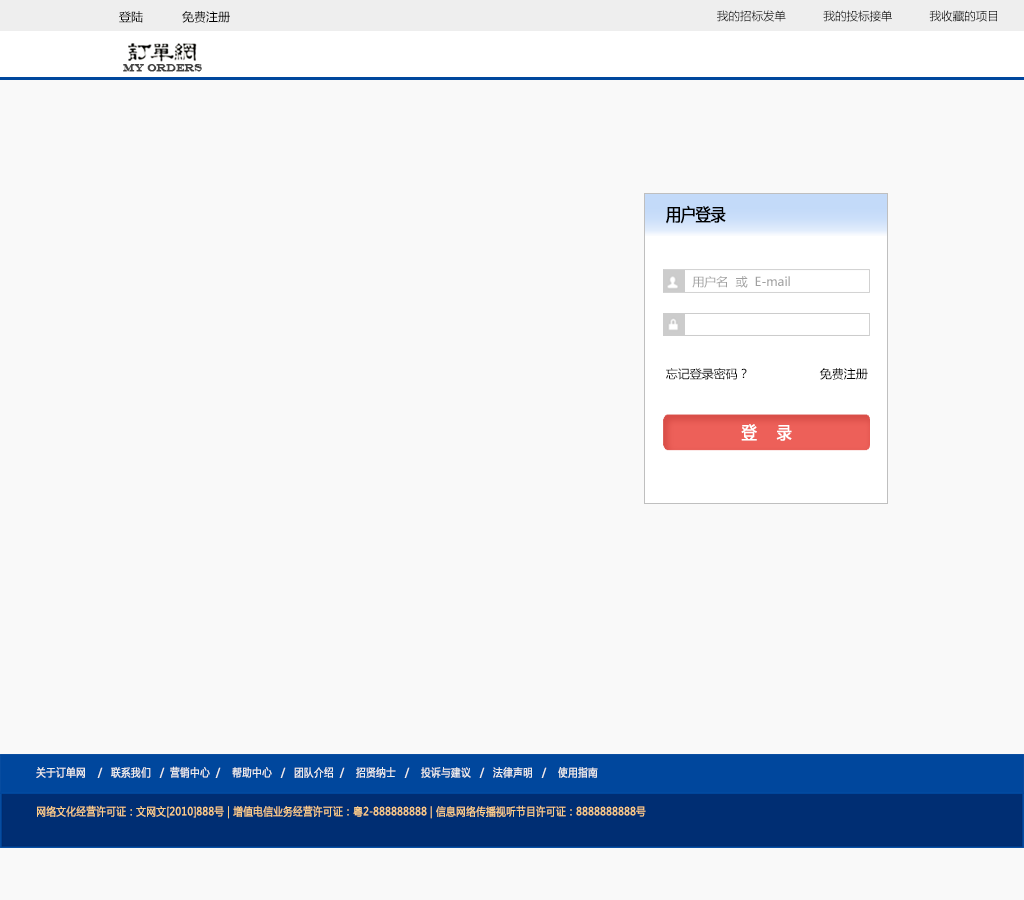
<style>
.page{position:relative;width:1024px;height:900px;background:#f9f9f9}
.page>*{position:absolute;margin:0}
.t1{font:12px "MicrosoftYaHei";color:#000000}
.t2{font:11.5px "MicrosoftYaHei";color:#000000}
.t3{font:11px "EngraversMT";color:#434343;font-variant:small-caps;font-weight:bold;scale:0.86 1}
.t4{font:17.4px "MicrosoftYaHei";color:#000000;font-variant:small-caps;font-weight:bold;scale:0.86 1}
.t5{font:12px "MicrosoftYaHei";color:#a0a0a0}
.t6{font:17.4px "MicrosoftYaHei";color:#ffffff;font-variant:small-caps;font-weight:bold;scale:0.86 1}
.t7{font:11px "MicrosoftYaHei";color:#eeeeee;font-variant:small-caps;font-weight:bold;scale:0.86 1}
.t8{font:15.4px "STXihei";color:#eeeeee;font-variant:small-caps;font-weight:bold;scale:0.86 1}
.t9{font:11px "MicrosoftYaHei";color:#facd89;font-variant:small-caps;font-weight:bold;scale:0.87 1}
.t10{font:11px "MicrosoftYaHei";color:#eeeeee;font-variant:small-caps;font-weight:bold;scale:0.87 1}
</style>
<div class="page">
<p class="t1" style="left:119px;top:11px;width:111px;height:12px">登陆           免费注册</p>
<p class="t2" style="left:717px;top:10px;width:280px;height:12px">我的招标发单           我的投标接单           我收藏的项目</p>
<p class="t3" style="left:123px;top:64px;width:79px;height:8px">MY ORDERS</p>
<p class="t4" style="left:666px;top:205px;width:60px;height:19px">用户登录</p>
<p class="t5" style="left:692px;top:276px;width:98px;height:12px">用户名  或  E-mail</p>
<p class="t1" style="left:666px;top:368px;width:81px;height:12px">忘记登录密码？</p>
<p class="t1" style="left:819px;top:368px;width:49px;height:12px">免费注册</p>
<p class="t6" style="left:741px;top:424px;width:51px;height:17px">登    录</p>
<p class="t7" style="left:36px;top:766px;width:562px;height:12px"><span class="t8"><br><br></span>关于订单网    /   联系我们   /  营销中心  /    帮助中心   /   团队介绍  /    招贤纳士   /    投诉与建议   /   法律声明   /    使用指南</p>
<p class="t9" style="left:37px;top:805px;width:609px;height:14px"><span class="t10"> </span>网络文化经营许可证：文网文[2010]888号 | 增值电信业务经营许可证：粤2-888888888 | 信息网络传播视听节目许可证：8888888888号</p>
<p class="t9" style="left:37px;top:805px;width:609px;height:14px"><span class="t10"> </span>网络文化经营许可证：文网文[2010]888号 | 增值电信业务经营许可证：粤2-888888888 | 信息网络传播视听节目许可证：8888888888号</p>
</div>
